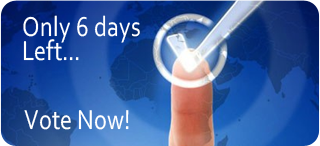
<style>
.page{position:relative;width:320px;height:146px}
.page>*{position:absolute;margin:0}
.t1{font:28.8px/24px "Corbel";color:#ffffff;scale:0.83 1}
.t2{font:28.8px "Corbel";color:#ffffff;scale:0.83 1}
</style>
<div class="page">
<p class="t1" style="left:23px;top:15px;width:117px;height:46px">Only 6 days<br>Left...</p>
<p class="t2" style="left:24px;top:110px;width:105px;height:20px">Vote Now!</p>
</div>
